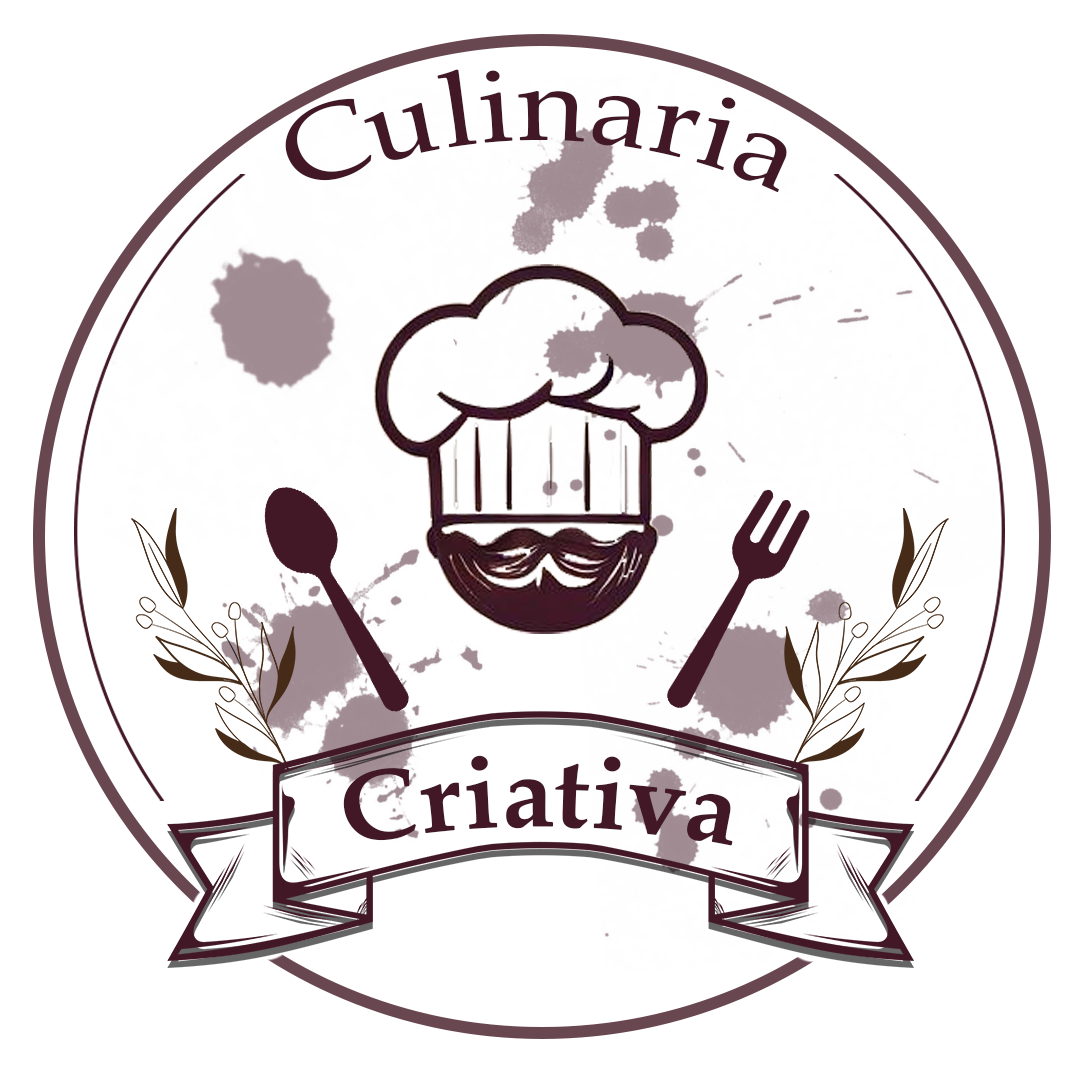
<style>
.page{position:relative;width:1080px;height:1080px;background:#ffffff}
.page>*{position:absolute;margin:0}
.t1{font:105.9px "PalatinoLinotype-Roman";letter-spacing:0.025em;color:#421826}
.t2{font:98.9px "PalatinoLinotype-Bold";letter-spacing:0.025em;color:#421826}
</style>
<div class="page">
<p class="t1" style="left:285px;top:69px;width:502px;height:124px">Culinaria</p>
<p class="t2" style="left:343px;top:755px;width:390px;height:91px">Criativa</p>
</div>
